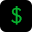
<style>
.page{position:relative;width:32px;height:32px;background:#000000}
.page>*{position:absolute;margin:0}
.t1{font:25px "Inconsolata-Regular";color:#08b230}
</style>
<div class="page">
<p class="t1" style="left:11px;top:6px;width:11px;height:19px">$</p>
</div>
